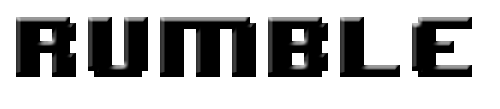
<style>
.page{position:relative;width:500px;height:109px;background:#ffffff}
.page>*{position:absolute;margin:0}
.t1{font:72px "8BITWONDERNominal";color:#000000}
</style>
<div class="page">
<p class="t1" style="left:16px;top:17px;width:456px;height:60px">RUMBLE</p>
</div>
